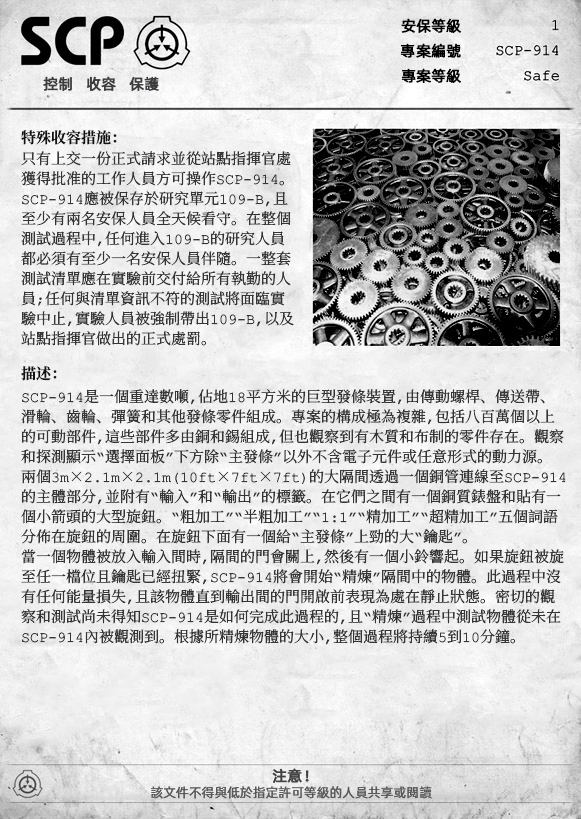
<style>
.page{position:relative;width:581px;height:819px}
.page>*{position:absolute;margin:0}
.t1{font:15px "AlibabaPuHuiTiR";color:#000000;font-weight:bold}
.t2{font:15px "AlibabaPuHuiTiR";color:#3d3d3d;font-weight:bold}
.t3{font:15px "ContainmentBreach-Bold";color:#121212}
.t4{font:15px/20px "ContainmentBreach-Regular";color:#353535}
.t5{font:15px "AlibabaPuHuiTiR";color:#414141;font-weight:bold}
.t6{font:13px "AlibabaPuHuiTiR";color:#575757}
</style>
<div class="page">
<p class="t1" style="left:401px;top:18px;width:60px;height:15px">安保等級</p>
<p class="t1" style="left:400px;top:43px;width:61px;height:15px">專案編號</p>
<p class="t2" style="left:43px;top:76px;width:116px;height:15px">控制   收容   保護</p>
<p class="t1" style="left:401px;top:68px;width:60px;height:15px">專案等級</p>
<p class="t3" style="left:21px;top:130px;width:96px;height:15px">特殊收容措施：</p>
<p class="t4" style="left:21px;top:151px;width:273px;height:195px">只有上交一份正式請求並從站點指揮官處<br>獲得批准的工作人員方可操作SCP-914。<br>SCP-914應被保存於研究單元109-B，且<br>至少有兩名安保人員全天候看守。在整個<br>測試過程中，任何進入109-B的研究人員<br>都必須有至少一名安保人員伴隨。一整套<br>測試清單應在實驗前交付給所有執勤的人<br>員；任何與清單資訊不符的測試將面臨實<br>驗中止，實驗人員被強制帶出109-B，以及<br>站點指揮官做出的正式處罰。</p>
<p class="t3" style="left:21px;top:366px;width:36px;height:15px">描述：</p>
<p class="t4" style="left:21px;top:389px;width:545px;height:256px">SCP-914是一個重達數噸，佔地18平方米的巨型發條裝置，由傳動螺桿、傳送帶、<br>滑輪、齒輪、彈簧和其他發條零件組成。專案的構成極為複雜，包括八百萬個以上<br>的可動部件，這些部件多由銅和錫組成，但也觀察到有木質和布制的零件存在。觀察<br>和探測顯示“選擇面板”下方除“主發條”以外不含電子元件或任意形式的動力源。<br>兩個3m×2.1m×2.1m（10ft×7ft×7ft）的大隔間透過一個銅管連線至SCP-914<br>的主體部分，並附有“輸入”和“輸出”的標籤。在它們之間有一個銅質錶盤和貼有一<br>個小箭頭的大型旋鈕。“粗加工”“半粗加工”“1:1”“精加工”“超精加工”五個詞語<br>分佈在旋鈕的周圍。在旋鈕下面有一個給“主發條”上勁的大“鑰匙”。<br>當一個物體被放入輸入間時，隔間的門會關上，然後有一個小鈴響起。如果旋鈕被旋<br>至任一檔位且鑰匙已經扭緊，SCP-914將會開始“精煉”隔間中的物體。此過程中沒<br>有任何能量損失，且該物體直到輸出間的門開啟前表現為處在靜止狀態。密切的觀<br>察和測試尚未得知SCP-914是如何完成此過程的，且“精煉”過程中測試物體從未在<br>SCP-914內被觀測到。根據所精煉物體的大小，整個過程將持續5到10分鐘。</p>
<p class="t5" style="left:272px;top:768px;width:37px;height:15px">注意！</p>
<p class="t6" style="left:151px;top:786px;width:281px;height:13px">該文件不得與低於指定許可等級的人員共享或閱讀</p>
</div>
